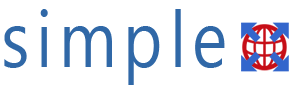
<style>
.page{position:relative;width:300px;height:100px;background:#ffffff}
.page>*{position:absolute;margin:0}
.t1{font:79px "SegoeUI";letter-spacing:0.1em;color:#3068a7;scale:0.85 1}
</style>
<div class="page">
<p class="t1" style="left:4px;top:9px;width:221px;height:76px">simple</p>
</div>
